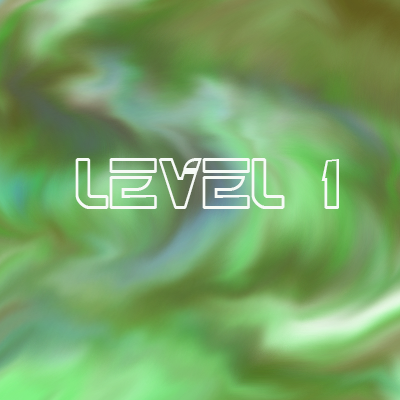
<style>
.page{position:relative;width:400px;height:400px}
.page>*{position:absolute;margin:0}
.t1{font:72px "TRN";color:#f6faf6}
</style>
<div class="page">
<p class="t1" style="left:75px;top:158px;width:264px;height:51px">Level 1</p>
</div>
